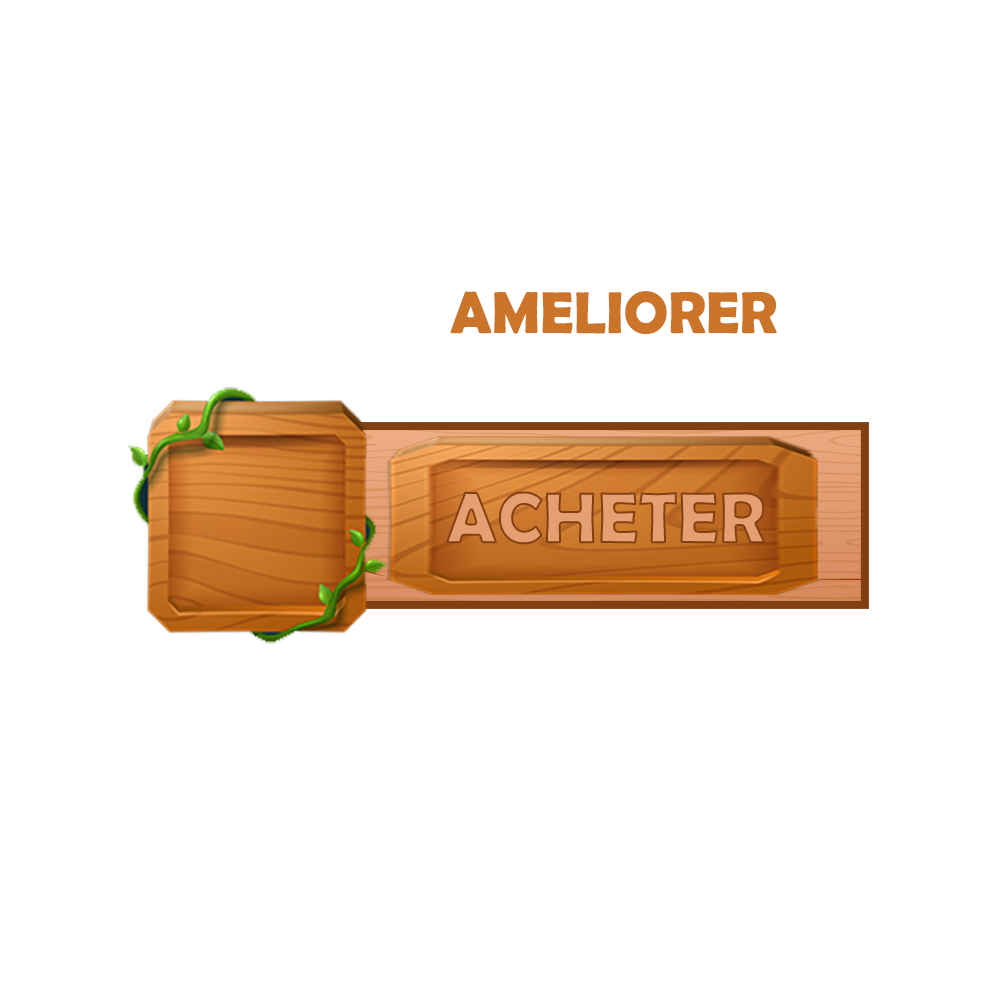
<style>
.page{position:relative;width:1000px;height:1000px;background:#ffffff}
.page>*{position:absolute;margin:0}
.t1{font:59.3px "BerlinSansFBDemi-Bold";color:#cb752c}
.t2{font:73.3px "BerlinSansFBDemi-Bold";color:#e5a072}
</style>
<div class="page">
<p class="t1" style="left:450px;top:291px;width:327px;height:43px">AMELIORER</p>
<p class="t2" style="left:446px;top:491px;width:319px;height:54px">ACHETER</p>
</div>
